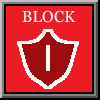
<style>
.page{position:relative;width:100px;height:100px;background:#ed1c24}
.page>*{position:absolute;margin:0}
.t1{font:16px "Georgia";color:#ffffff}
</style>
<div class="page">
<p class="t1" style="left:22px;top:10px;width:54px;height:13px">BLOCK</p>
</div>
